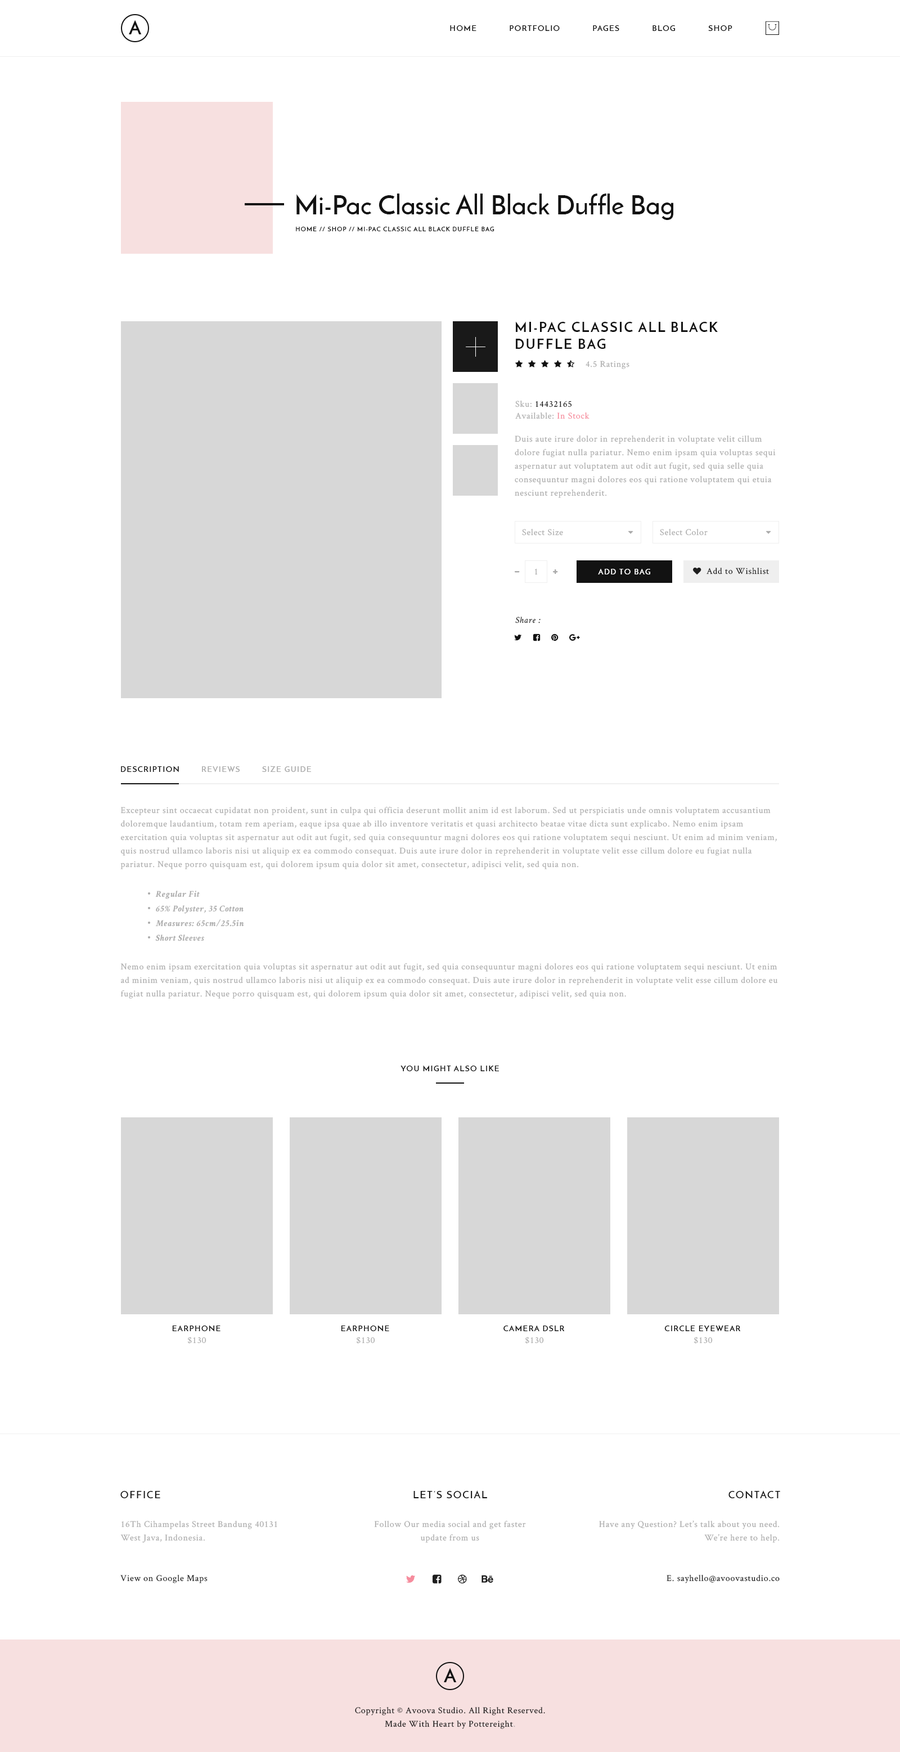
<style>
.page{position:relative;width:900px;height:1752px;background:#ffffff}
.page>*{position:absolute;margin:0}
.t1{font:19.1px "JosefinSans-Bold";letter-spacing:0.5em;color:#121212;text-transform:uppercase}
.t2{font:7.9px "JosefinSans-SemiBold";letter-spacing:0.1em;color:#121212;text-transform:uppercase}
.t3{font:27px "JosefinSans-SemiBold";color:#121212}
.t4{font:6.2px "JosefinSans-SemiBold";letter-spacing:0.1em;color:#121212;text-transform:uppercase}
.t5{font:13.5px/16.9px "JosefinSans-Bold";letter-spacing:0.1em;color:#121212;text-transform:uppercase}
.t6{font:9px "CrimsonText-Roman";letter-spacing:0.05em;color:#ababab}
.t7{font:9px "CrimsonText-Roman";letter-spacing:0.05em;color:#121212}
.t8{font:9px "CrimsonText-Roman";letter-spacing:0.05em;color:#f68c9d}
.t9{font:9px/13.5px "CrimsonText-Roman";letter-spacing:0.05em;color:#ababab}
.t10{font:7.9px "JosefinSans-SemiBold";letter-spacing:0.1em;color:#ffffff;text-transform:uppercase}
.t11{font:9px "CrimsonText-Italic";letter-spacing:0.05em;color:#121212}
.t12{font:7.9px "JosefinSans-SemiBold";letter-spacing:0.1em;color:#ababab;text-transform:uppercase}
.t13{font:9px "CrimsonText-BoldItalic";letter-spacing:0.05em;color:#ababab}
.t14{font:10.1px "JosefinSans-SemiBold";letter-spacing:0.1em;color:#121212;text-transform:uppercase}
.t15{font:9px/13.5px "CrimsonText-Roman";letter-spacing:0.05em;color:#121212}
</style>
<div class="page">
<p class="t1" style="left:129px;top:20px;width:13px;height:14px">a</p>
<p class="t2" style="left:450px;top:25px;width:26px;height:6px">Home</p>
<p class="t2" style="left:510px;top:25px;width:50px;height:6px">Portfolio</p>
<p class="t2" style="left:593px;top:25px;width:26px;height:6px">Pages</p>
<p class="t2" style="left:652px;top:25px;width:23px;height:6px">Blog</p>
<p class="t2" style="left:708px;top:25px;width:24px;height:6px">Shop</p>
<p class="t3" style="left:296px;top:194px;width:377px;height:26px">Mi-Pac Classic All Black Duffle Bag</p>
<p class="t4" style="left:296px;top:226px;width:198px;height:5px">Home // Shop // Mi-Pac Classic All Black Duffle Bag</p>
<p class="t5" style="left:516px;top:321px;width:202px;height:28px">Mi-Pac Classic All Black<br>Duffle Bag</p>
<p class="t6" style="left:586px;top:361px;width:43px;height:8px">4.5 Ratings</p>
<p class="t7" style="left:515px;top:400px;width:57px;height:7px"><span class="t6">Sku: </span>14432165</p>
<p class="t6" style="left:515px;top:412px;width:75px;height:7px">Available: <span class="t8">In Stock</span></p>
<p class="t9" style="left:515px;top:435px;width:261px;height:63px">Duis aute irure dolor in reprehenderit in voluptate velit cillum dolore fugiat nulla pariatur. Nemo enim ipsam quia voluptas sequi aspernatur aut voluptatem aut odit aut fugit, sed quia selle quia consequuntur magni dolores eos qui ratione voluptatem qui etuia nesciunt reprehenderit.</p>
<p class="t6" style="left:522px;top:529px;width:41px;height:7px">Select Size</p>
<p class="t6" style="left:660px;top:529px;width:48px;height:7px">Select Color</p>
<p class="t6" style="left:535px;top:568px;width:3px;height:7px">1</p>
<p class="t10" style="left:598px;top:569px;width:52px;height:5px">Add To Bag</p>
<p class="t7" style="left:706px;top:568px;width:63px;height:6px">Add to Wishlist</p>
<p class="t11" style="left:515px;top:616px;width:26px;height:7px">Share :</p>
<p class="t2" style="left:121px;top:766px;width:58px;height:6px">Description</p>
<p class="t12" style="left:202px;top:766px;width:38px;height:6px">Reviews</p>
<p class="t12" style="left:262px;top:766px;width:49px;height:6px">Size guide</p>
<p class="t9" style="left:120px;top:807px;width:657px;height:62px">Excepteur sint occaecat cupidatat non proident, sunt in culpa qui officia deserunt mollit anim id est laborum. Sed ut perspiciatis unde omnis voluptatem accusantium doloremque laudantium, totam rem aperiam, eaque ipsa quae ab illo inventore veritatis et quasi architecto beatae vitae dicta sunt explicabo. Nemo enim ipsam exercitation quia voluptas sit aspernatur aut odit aut fugit, sed quia consequuntur magni dolores eos qui ratione voluptatem sequi nesciunt. Ut enim ad minim veniam, quis nostrud ullamco laboris nisi ut aliquip ex ea commodo consequat. Duis aute irure dolor in reprehenderit in voluptate velit esse cillum dolore eu fugiat nulla pariatur. Neque porro quisquam est, qui dolorem ipsum quia dolor sit amet, consectetur, adipisci velit, sed quia non.</p>
<p class="t13" style="left:155px;top:890px;width:45px;height:9px">Regular Fit</p>
<p class="t13" style="left:156px;top:905px;width:88px;height:9px">65% Polyster, 35 Cotton</p>
<p class="t13" style="left:155px;top:919px;width:89px;height:7px">Measures: 65cm/25.5in</p>
<p class="t13" style="left:155px;top:934px;width:49px;height:7px">Short Sleeves</p>
<p class="t9" style="left:120px;top:963px;width:658px;height:35px">Nemo enim ipsam exercitation quia voluptas sit aspernatur aut odit aut fugit, sed quia consequuntur magni dolores eos qui ratione voluptatem sequi nesciunt. Ut enim ad minim veniam, quis nostrud ullamco laboris nisi ut aliquip ex ea commodo consequat. Duis aute irure dolor in reprehenderit in voluptate velit esse cillum dolore eu fugiat nulla pariatur. Neque porro quisquam est, qui dolorem ipsum quia dolor sit amet, consectetur, adipisci velit, sed quia non.</p>
<p class="t2" style="left:400px;top:1065px;width:99px;height:6px">You Might Also Like</p>
<p class="t2" style="left:172px;top:1325px;width:48px;height:6px">Earphone</p>
<p class="t2" style="left:341px;top:1325px;width:48px;height:6px">Earphone</p>
<p class="t2" style="left:503px;top:1325px;width:62px;height:6px">Camera DSLR</p>
<p class="t2" style="left:664px;top:1325px;width:77px;height:6px">Circle Eyewear</p>
<p class="t6" style="left:188px;top:1336px;width:18px;height:7px">$130</p>
<p class="t6" style="left:357px;top:1336px;width:18px;height:7px">$130</p>
<p class="t6" style="left:525px;top:1336px;width:19px;height:7px">$130</p>
<p class="t6" style="left:694px;top:1336px;width:19px;height:7px">$130</p>
<p class="t14" style="left:120px;top:1491px;width:40px;height:7px">Office</p>
<p class="t14" style="left:413px;top:1490px;width:74px;height:8px">Let’s Social</p>
<p class="t14" style="left:728px;top:1490px;width:52px;height:8px">Contact</p>
<p class="t9" style="left:120px;top:1520px;width:157px;height:22px">16Th Cihampelas Street Bandung 40131<br>West Java, Indonesia.</p>
<p class="t9" style="left:374px;top:1520px;width:152px;height:22px;text-align:center">Follow Our media social and get faster<br>update from us</p>
<p class="t9" style="left:599px;top:1520px;width:181px;height:22px;text-align:right">Have any Question? Let’s talk about you need.<br>We’re here to help.</p>
<p class="t7" style="left:120px;top:1574px;width:88px;height:9px">View on Google Maps</p>
<p class="t7" style="left:667px;top:1574px;width:113px;height:9px">E. sayhello@avoovastudio.co</p>
<p class="t1" style="left:444px;top:1667px;width:13px;height:15px">a</p>
<p class="t15" style="left:355px;top:1707px;width:190px;height:22px;text-align:center">Copyright © Avoova Studio. All Right Reserved.<br>Made With Heart by Pottereight<span class="t9">.</span></p>
</div>
